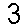
<style>
.page{position:relative;width:28px;height:28px;background:#ffffff}
.page>*{position:absolute;margin:0}
.t1{font:30px "ArialNarrow";color:#000000}
</style>
<div class="page">
<p class="t1" style="left:8px;top:3px;width:12px;height:21px">3</p>
</div>
